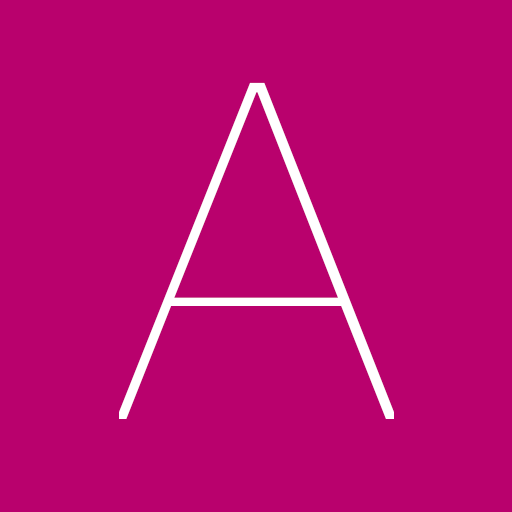
<style>
.page{position:relative;width:512px;height:512px;background:#b9016d}
.page>*{position:absolute;margin:0}
.t1{font:480.7px "StagSans-Thin";letter-spacing:0.04em;color:#ffffff;scale:1.1 1}
</style>
<div class="page">
<p class="t1" style="left:119px;top:82px;width:275px;height:337px">A</p>
</div>
